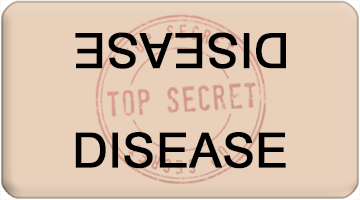
<style>
.page{position:relative;width:360px;height:200px;background:#e8d0bb}
.page>*{position:absolute;margin:0}
.t1{font:48px "ArialMT";color:#000000;font-weight:bold}
</style>
<div class="page">
<p class="t1" style="left:75px;top:32px;width:211px;height:37px;rotate:180deg">DISEASE</p>
<p class="t1" style="left:75px;top:132px;width:211px;height:37px">DISEASE</p>
</div>
